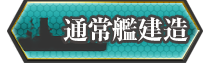
<style>
.page{position:relative;width:210px;height:63px}
.page>*{position:absolute;margin:0}
.t1{font:26px "RyuminPro-ExBold";letter-spacing:-0.025em;color:#ffffff}
</style>
<div class="page">
<p class="t1" style="left:63px;top:17px;width:125px;height:25px">通常艦建造</p>
</div>
